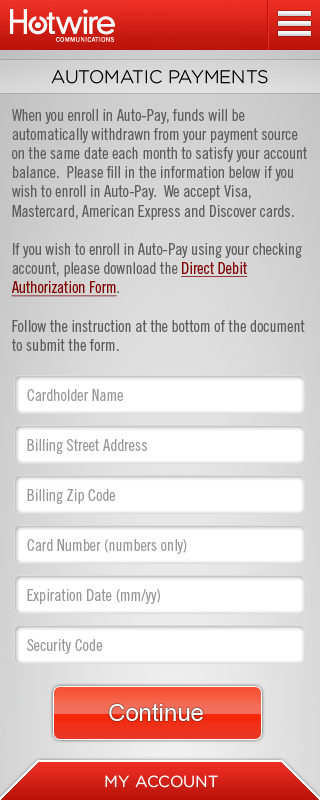
<style>
.page{position:relative;width:320px;height:800px;background:#ffffff}
.page>*{position:absolute;margin:0}
.t1{font:18px "Gotham-Light";color:#000000;text-transform:uppercase}
.t2{font:16px "TradeGothicLTStd-Cn18";color:#5e5e5e}
.t3{font:16px "TradeGothicLTStd-Cn18";color:#810000;text-decoration:underline}
.t4{font:16px "TradeGothicLTStd-Cn18";color:#989898}
.t5{font:24px "ArialMT";color:#ffffff}
.t6{font:16px "Gotham-Book";color:#ffffff;text-transform:uppercase}
</style>
<div class="page">
<p class="t1" style="left:51px;top:70px;width:217px;height:14px">Automatic Payments</p>
<p class="t2" style="left:11px;top:109px;width:296px;height:242px">When you enroll in Auto-Pay, funds will be automatically withdrawn from your payment source on the same date each month to satisfy your account balance.  Please fill in the information below if you wish to enroll in Auto-Pay.  We accept Visa, Mastercard, American Express and Discover cards.<br><br>If you wish to enroll in Auto-Pay using your checking account, please download the <span class="t3">Direct Debit Authorization Form</span>.<br><br>Follow the instruction at the bottom of the document to submit the form.</p>
<p class="t4" style="left:27px;top:389px;width:96px;height:12px">Cardholder Name</p>
<p class="t4" style="left:27px;top:439px;width:120px;height:15px">Billing Street Address</p>
<p class="t4" style="left:27px;top:489px;width:88px;height:15px">Billing Zip Code</p>
<p class="t4" style="left:27px;top:539px;width:160px;height:15px">Card Number (numbers only)</p>
<p class="t4" style="left:27px;top:589px;width:133px;height:15px">Expiration Date (mm/yy)</p>
<p class="t4" style="left:27px;top:639px;width:75px;height:15px">Security Code</p>
<p class="t5" style="left:109px;top:703px;width:94px;height:18px">Continue</p>
<p class="t6" style="left:105px;top:775px;width:113px;height:13px">My Account</p>
</div>
